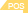
<style>
.page{position:relative;width:28px;height:13px;background:#ffd767}
.page>*{position:absolute;margin:0}
.t1{font:8px "ArialMT";letter-spacing:-0.01em;color:#ffffff}
</style>
<div class="page">
<p class="t1" style="left:8px;top:3px;width:17px;height:6px">POS</p>
</div>
